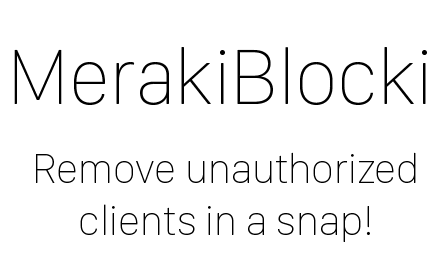
<style>
.page{position:relative;width:440px;height:280px;background:#ffffff}
.page>*{position:absolute;margin:0}
.t1{font:80.7px "SanFranciscoDisplay-Ultralight";color:#000000}
.t2{font:43px "SanFranciscoDisplay-Ultralight";color:#000000}
</style>
<div class="page">
<p class="t1" style="left:14px;top:47px;width:413px;height:58px">MerakiBlocki</p>
<p class="t2" style="left:36px;top:152px;width:380px;height:90px;text-align:center">Remove unauthorized<br>clients in a snap!</p>
</div>
